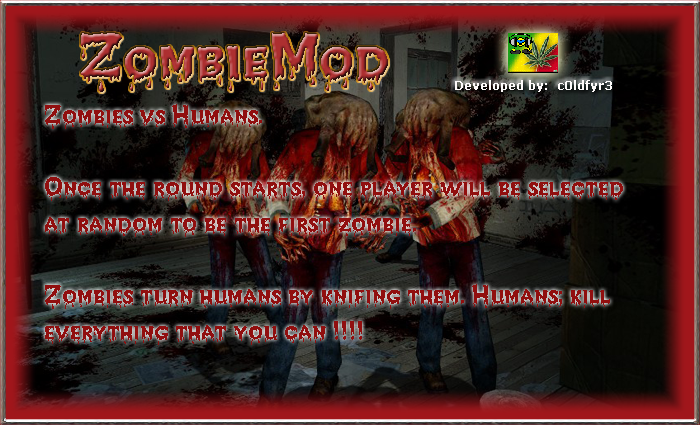
<style>
.page{position:relative;width:700px;height:425px}
.page>*{position:absolute;margin:0}
.t1{font:72px "CreepyRegular"}
.t2{font:12px "Verdana-Bold";color:#fefbfb}
.t3{font:30px "CreepyRegular";color:#910f0f}
</style>
<div class="page">
<p class="t1" style="left:81px;top:33px;width:307px;height:59px">ZombieMod</p>
<p class="t2" style="left:455px;top:80px;width:157px;height:12px">Developed by:  c0ldfyr3</p>
<p class="t3" style="left:45px;top:104px;width:578px;height:241px">Zombies vs Humans.<br><br>Once the round starts, one player will be selected at random to be the first zombie.<br><br>Zombies turn humans by knifing them. Humans; kill everything that you can !!!!</p>
</div>
